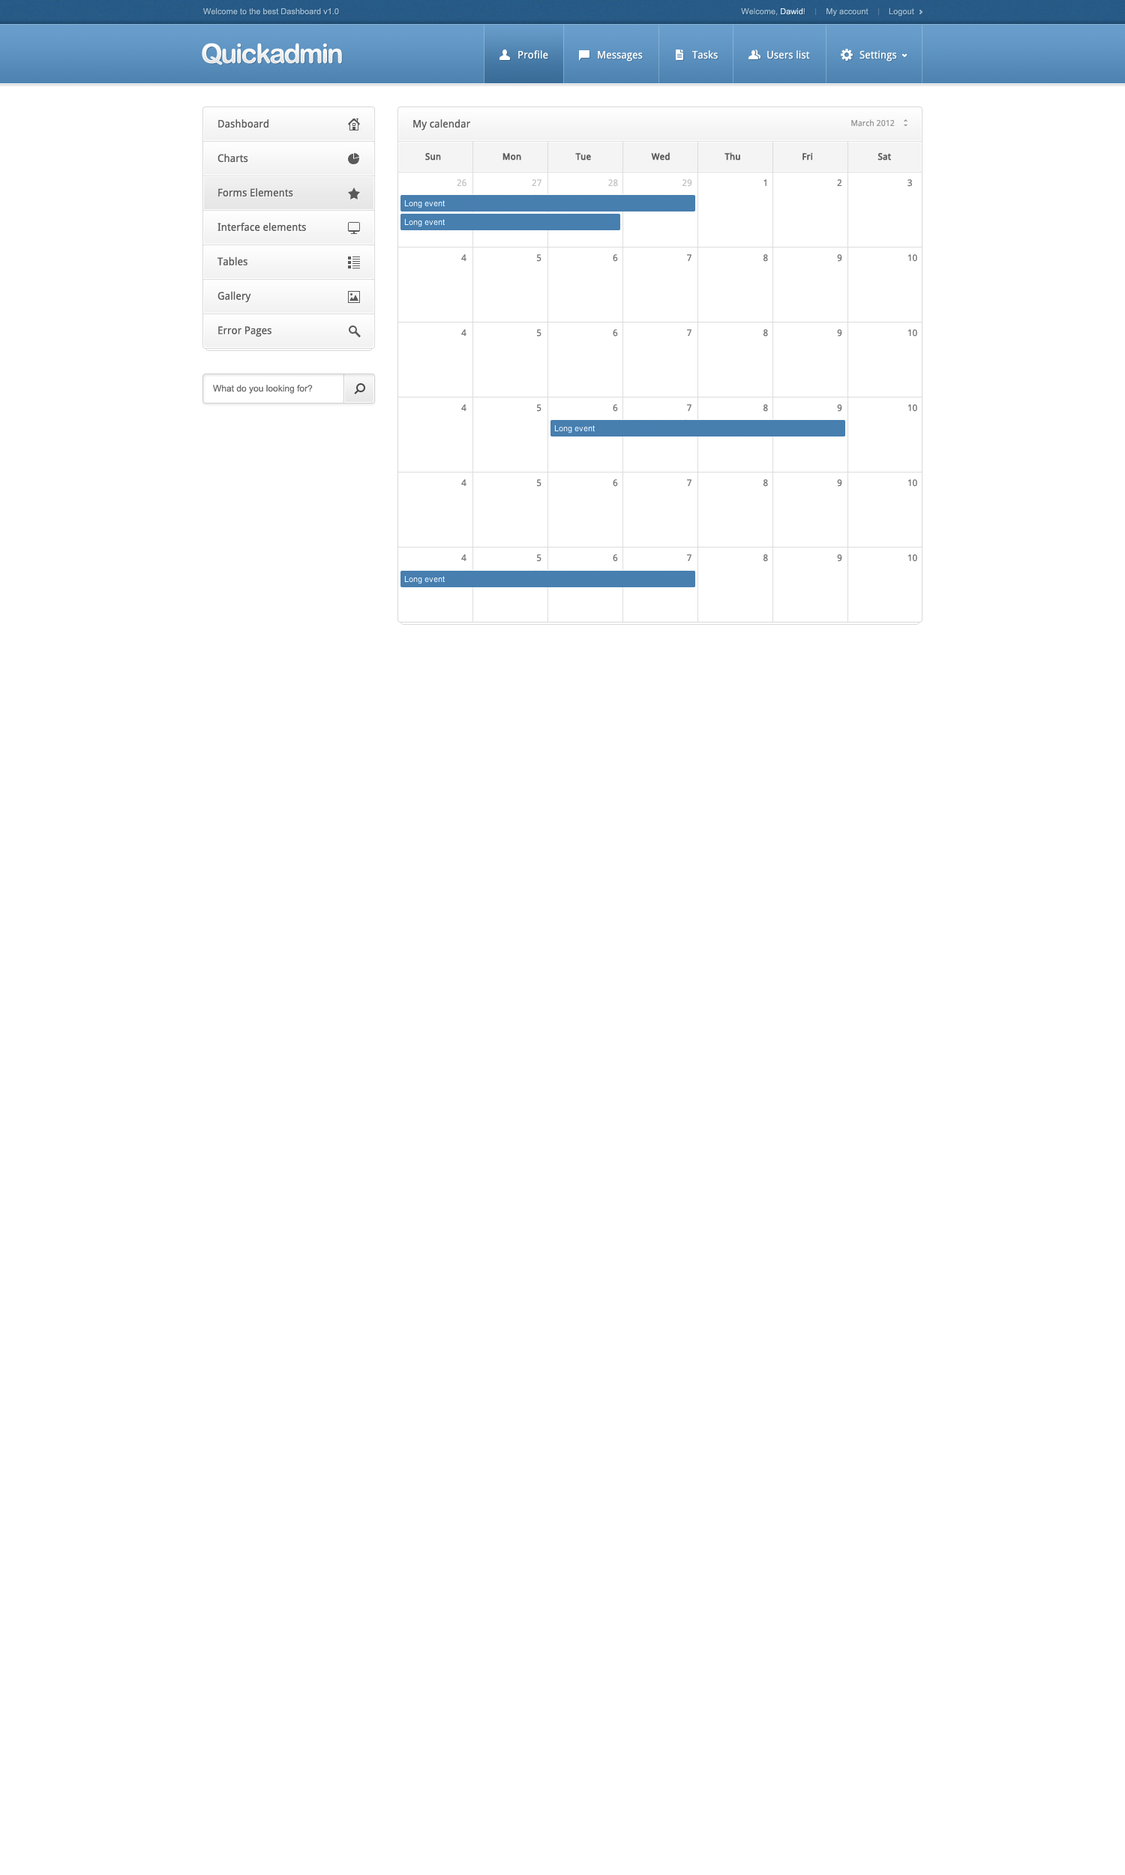
<style>
.page{position:relative;width:1125px;height:1875px;background:#ffffff}
.page>*{position:absolute;margin:0}
.t1{font:8.2px "ArialMT";color:#9ebdd4}
.t2{font:8.2px "ArialMT";color:#d7e7f2}
.t3{font:27px "ArialRoundedMTBold";letter-spacing:-0.06em;color:#ffffff}
.t4{font:10.5px "DroidSans";color:#ffffff}
.t5{font:10.5px "DroidSans";color:#5a5a5a}
.t6{font:8.2px "DroidSans";color:#999999}
.t7{font:9px "DroidSans";color:#5a5a5a;font-weight:bold}
.t8{font:9px "DroidSans";color:#c3c3c3}
.t9{font:9px "DroidSans";color:#747474}
.t10{font:9px "ArialMT";color:#6f6f6f}
</style>
<div class="page">
<p class="t1" style="left:203px;top:8px;width:136px;height:7px">Welcome to the best Dashboard v1.0</p>
<p class="t1" style="left:741px;top:8px;width:173px;height:8px">Welcome, <span class="t2">Dawid</span>!         My account         Logout</p>
<p class="t3" style="left:202px;top:43px;width:140px;height:22px">Quickadmin</p>
<p class="t4" style="left:518px;top:50px;width:30px;height:9px">Profile</p>
<p class="t4" style="left:598px;top:51px;width:45px;height:11px">Messages</p>
<p class="t4" style="left:692px;top:50px;width:26px;height:9px">Tasks</p>
<p class="t4" style="left:767px;top:50px;width:43px;height:9px">Users list</p>
<p class="t4" style="left:860px;top:50px;width:37px;height:12px">Settings</p>
<p class="t5" style="left:218px;top:119px;width:88px;height:218px;text-align:justify">Dashboard<br>Charts<br>Forms Elements<br>Interface elements<br>Tables<br>Gallery<br>Error Pages</p>
<p class="t5" style="left:413px;top:119px;width:57px;height:11px">My calendar</p>
<p class="t6" style="left:851px;top:119px;width:44px;height:8px">March 2012</p>
<p class="t7" style="left:425px;top:152px;width:466px;height:8px">Sun           Mon        Tue      Wed   Thu            Fri          Sat</p>
<p class="t8" style="left:457px;top:179px;width:455px;height:8px">26             27          28       29       <span class="t9">  1       2            3</span></p>
<p class="t9" style="left:461px;top:254px;width:456px;height:8px">4               5            6         7         8       9            10</p>
<p class="t9" style="left:461px;top:329px;width:456px;height:8px">4               5            6         7         8       9            10</p>
<p class="t10" style="left:213px;top:385px;width:100px;height:9px">What do you looking for?</p>
<p class="t9" style="left:461px;top:404px;width:456px;height:8px">4               5            6         7         8       9            10</p>
<p class="t9" style="left:461px;top:479px;width:456px;height:8px">4               5            6         7         8       9            10</p>
<p class="t9" style="left:461px;top:554px;width:456px;height:8px">4               5            6         7         8       9            10</p>
</div>
